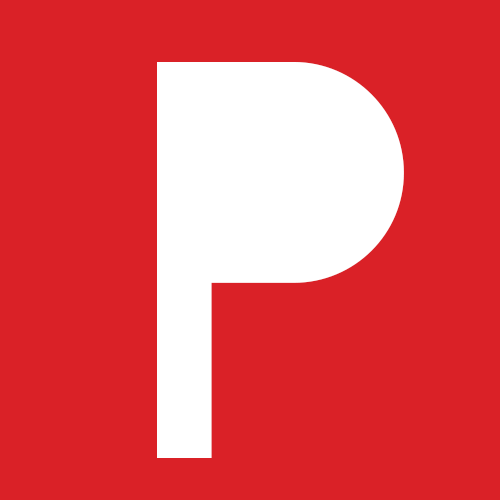
<style>
.page{position:relative;width:500px;height:500px;background:#da2127}
.page>*{position:absolute;margin:0}
.t1{font:556px "HWTMardell";letter-spacing:-0.04em;color:#ffffff}
</style>
<div class="page">
<p class="t1" style="left:157px;top:62px;width:247px;height:396px">P</p>
</div>
